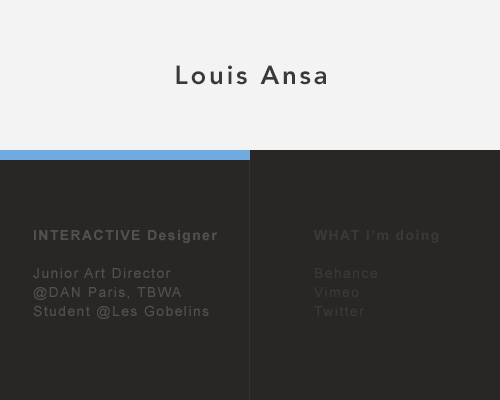
<style>
.page{position:relative;width:500px;height:400px;background:#292626}
.page>*{position:absolute;margin:0}
.t1{font:26px "AvenirLT-Heavy";letter-spacing:0.1em;color:#3b3838}
.t2{font:14px/19px "ArialMT";letter-spacing:0.1em;color:#545050}
.t3{font:14px/19px "Arial-BoldMT";letter-spacing:0.1em;color:#545050}
.t4{font:14px/19px "ArialMT";letter-spacing:0.1em;color:#3b3838}
.t5{font:14px/19px "Arial-BoldMT";letter-spacing:0.1em;color:#3b3838}
</style>
<div class="page">
<p class="t1" style="left:176px;top:65px;width:150px;height:20px">Louis Ansa</p>
<p class="t2" style="left:33px;top:229px;width:184px;height:90px"><span class="t3">INTERACTIVE Designer<br><br></span>Junior Art Director <br>@DAN Paris, TBWA<br>Student @Les Gobelins</p>
<p class="t4" style="left:314px;top:230px;width:125px;height:86px"><span class="t5">WHAT i’m doing<br><br></span>Behance<br>Vimeo<br>Twitter</p>
</div>
